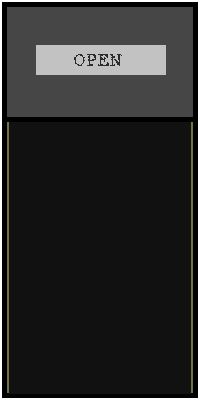
<style>
.page{position:relative;width:200px;height:400px;background:#111111}
.page>*{position:absolute;margin:0}
.t1{font:20px "PrestigeEliteStd-Bd";color:#2c2c2c}
</style>
<div class="page">
<p class="t1" style="left:74px;top:54px;width:48px;height:12px">OPEN</p>
</div>
